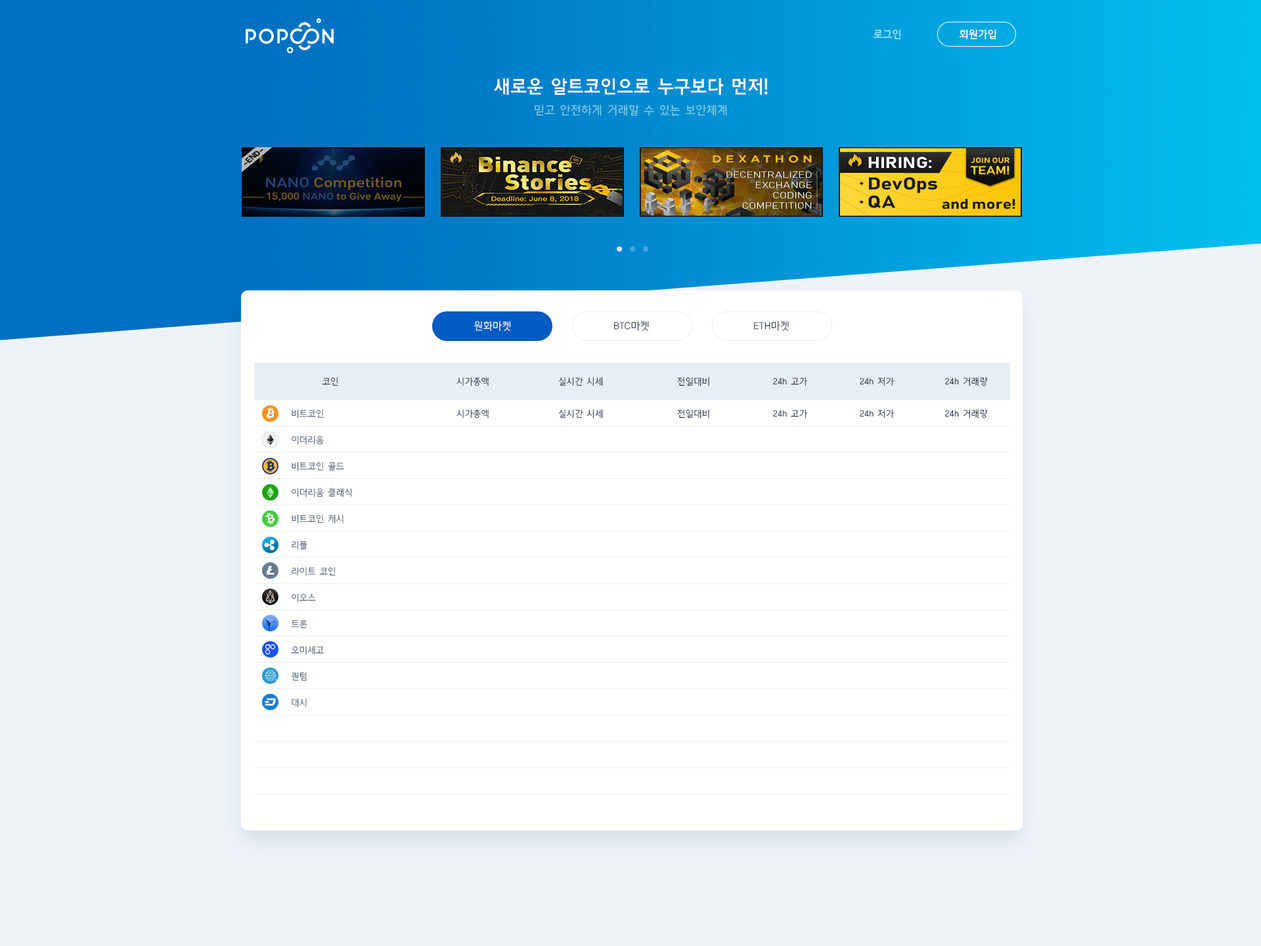
<style>
.page{position:relative;width:1261px;height:946px;background:#ffffff}
.page>*{position:absolute;margin:0}
.t1{font:10.5px "CreGoM";color:#aceaff}
.t2{font:10.5px "CreGoM";color:#ffffff}
.t3{font:18.4px "CreGoB";color:#ffffff}
.t4{font:11.8px "CreGoL";color:#88d5ea}
.t5{font:10.5px "CreGoL";color:#ffffff}
.t6{font:10.5px "CreGoL";color:#2f3b56}
.t7{font:9.2px "CreGoL";color:#2f3b56}
.t8{font:9.2px/26.3px "CreGoL";color:#586481}
</style>
<div class="page">
<p class="t1" style="left:873px;top:29px;width:28px;height:10px">로그인</p>
<p class="t2" style="left:959px;top:29px;width:37px;height:10px">회원가입</p>
<p class="t3" style="left:494px;top:78px;width:274px;height:17px">새로운 알트코인으로 누구보다 먼저!</p>
<p class="t4" style="left:535px;top:104px;width:192px;height:12px">믿고 안전하게 거래할 수 있는 보안체계</p>
<p class="t5" style="left:474px;top:321px;width:37px;height:10px">원화마켓</p>
<p class="t6" style="left:614px;top:321px;width:35px;height:10px">BTC마켓</p>
<p class="t6" style="left:754px;top:321px;width:35px;height:10px">ETH마켓</p>
<p class="t7" style="left:322px;top:377px;width:16px;height:8px">코인</p>
<p class="t7" style="left:456px;top:377px;width:33px;height:9px">시가총액</p>
<p class="t7" style="left:558px;top:377px;width:45px;height:9px">실시간 시세</p>
<p class="t7" style="left:677px;top:377px;width:32px;height:9px">전일대비</p>
<p class="t7" style="left:773px;top:377px;width:34px;height:9px">24h 고가</p>
<p class="t7" style="left:860px;top:377px;width:34px;height:9px">24h 저가</p>
<p class="t7" style="left:945px;top:377px;width:43px;height:9px">24h 거래량</p>
<p class="t8" style="left:291px;top:409px;width:61px;height:298px">비트코인<br>이더리움<br>비트코인 골드<br>이더리움 클래식<br>비트코인 캐시<br>리플<br>라이트 코인<br>이오스<br>트론<br>오미세고<br>퀀텀<br>대시</p>
<p class="t7" style="left:456px;top:409px;width:33px;height:9px">시가총액</p>
<p class="t7" style="left:558px;top:409px;width:45px;height:9px">실시간 시세</p>
<p class="t7" style="left:677px;top:409px;width:32px;height:9px">전일대비</p>
<p class="t7" style="left:773px;top:409px;width:34px;height:9px">24h 고가</p>
<p class="t7" style="left:860px;top:409px;width:34px;height:9px">24h 저가</p>
<p class="t7" style="left:945px;top:409px;width:43px;height:9px">24h 거래량</p>
</div>
